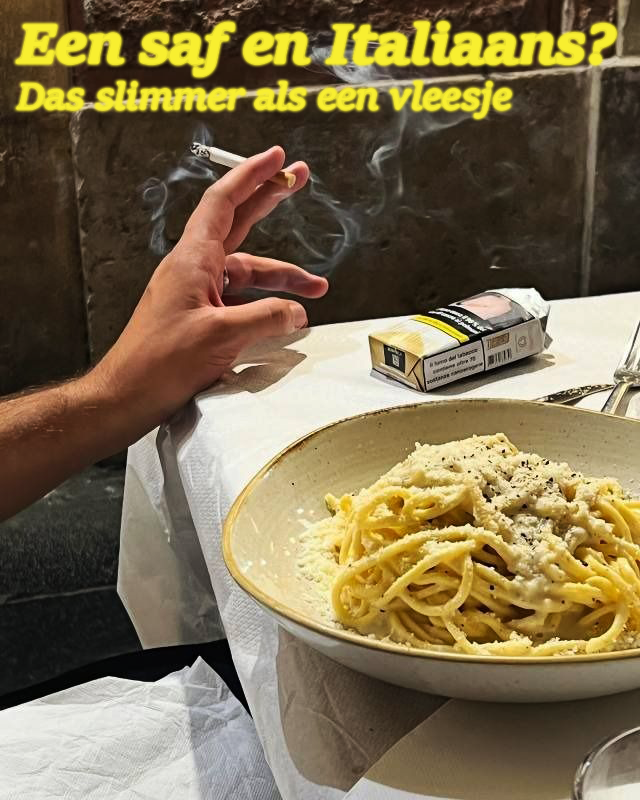
<style>
.page{position:relative;width:640px;height:800px}
.page>*{position:absolute;margin:0}
.t1{font:38px "Sitka-SmallItalic";letter-spacing:-0.02em;color:#f8ef30}
.t2{font:57px "Sitka-SmallBoldItalic";letter-spacing:-0.02em;color:#f8ef30}
</style>
<div class="page">
<p class="t1" style="left:16px;top:22px;width:600px;height:96px"><span class="t2">Een saf en Italiaans?<br></span>Das slimmer als een vleesje</p>
</div>
